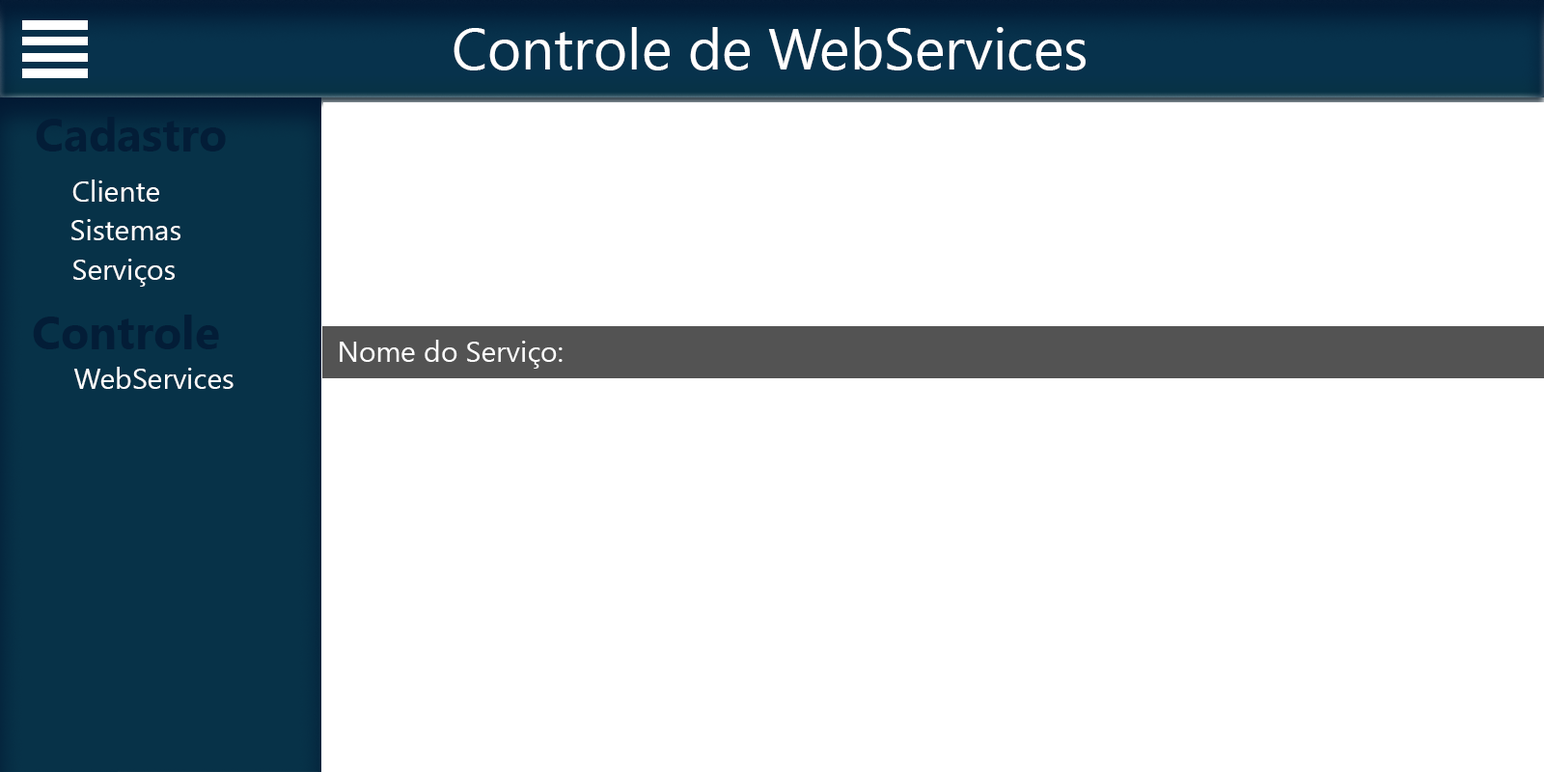
<style>
.page{position:relative;width:1544px;height:772px;background:#ffffff}
.page>*{position:absolute;margin:0}
.t1{font:57.9px "SegoeUI";color:#ffffff}
.t2{font:46.3px "SegoeUI-Bold";color:#031d37}
.t3{font:29px "SegoeUI";color:#ffffff}
</style>
<div class="page">
<p class="t1" style="left:454px;top:27px;width:632px;height:43px">Controle de WebServices</p>
<p class="t2" style="left:36px;top:117px;width:190px;height:35px">Cadastro</p>
<p class="t3" style="left:72px;top:180px;width:87px;height:22px">Cliente</p>
<p class="t3" style="left:71px;top:219px;width:109px;height:21px">Sistemas</p>
<p class="t3" style="left:73px;top:259px;width:102px;height:28px">Serviços</p>
<p class="t2" style="left:33px;top:315px;width:186px;height:34px">Controle</p>
<p class="t3" style="left:340px;top:340px;width:223px;height:29px">Nome do Serviço:</p>
<p class="t3" style="left:74px;top:367px;width:160px;height:22px">WebServices</p>
</div>
